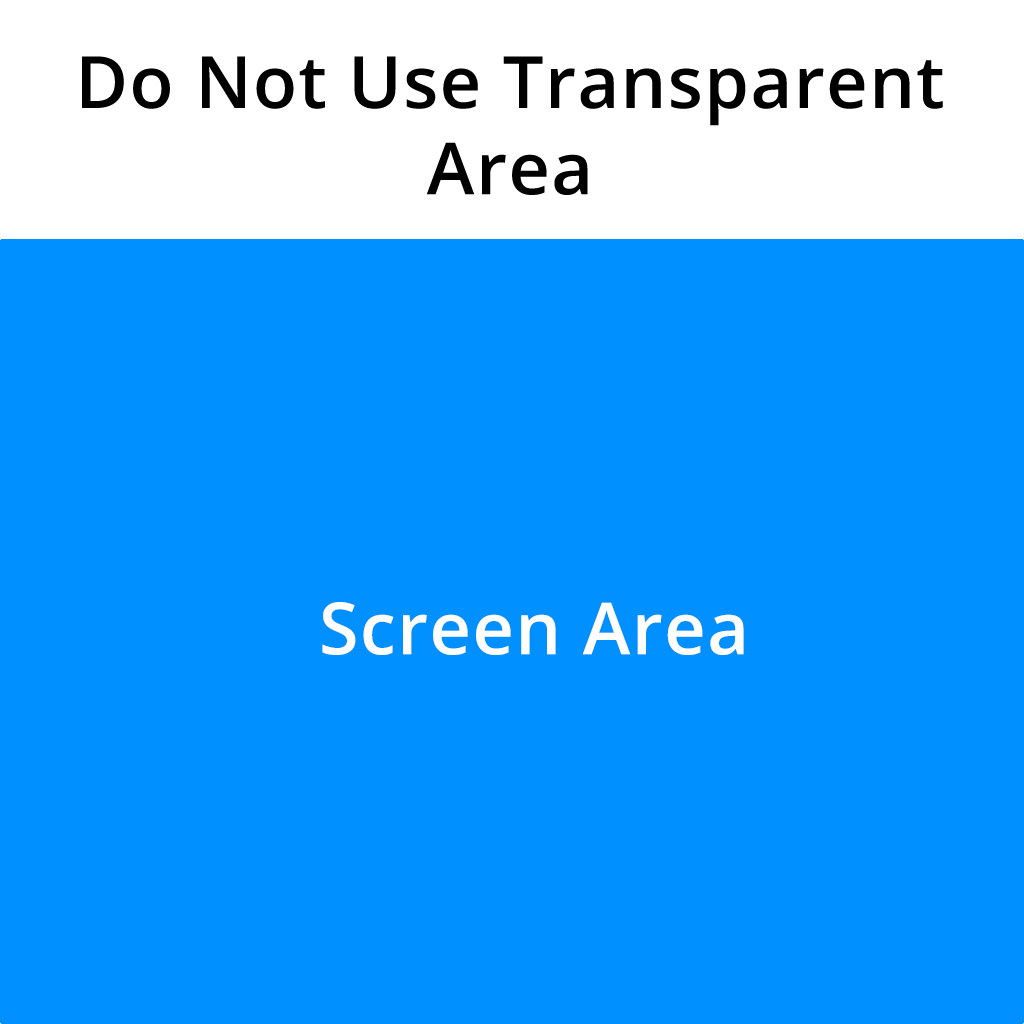
<style>
.page{position:relative;width:1024px;height:1024px;background:#0090ff}
.page>*{position:absolute;margin:0}
.t1{font:72px "OpenSans-Semibold";letter-spacing:0.02em;color:#000000}
.t2{font:72px "OpenSans-Semibold";letter-spacing:0.02em;color:#ffffff}
</style>
<div class="page">
<p class="t1" style="left:82px;top:56px;width:861px;height:139px;text-align:center">Do Not Use Transparent<br>Area</p>
<p class="t2" style="left:322px;top:602px;width:422px;height:53px">Screen Area</p>
</div>
